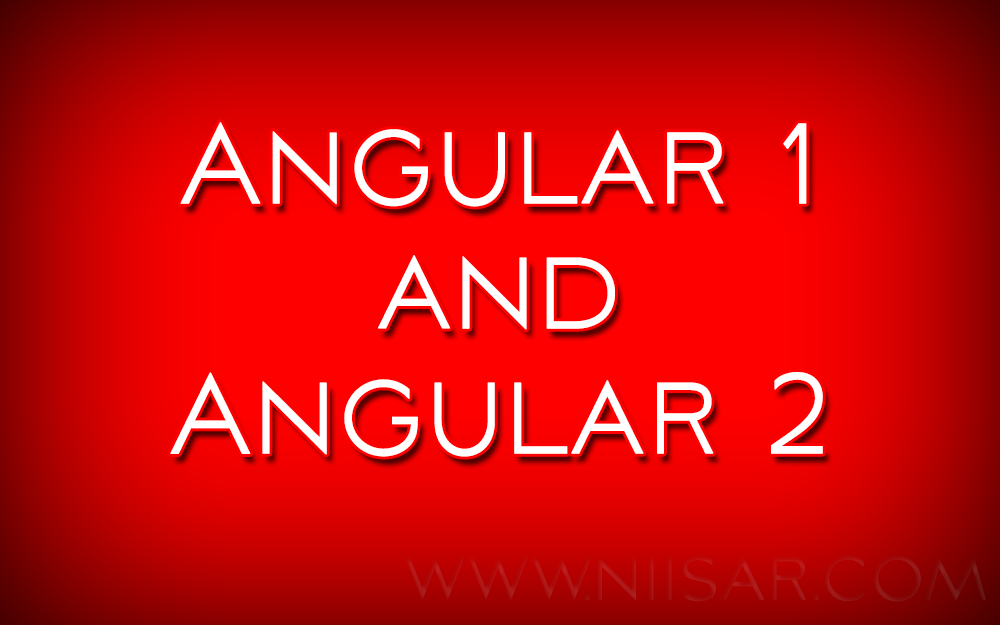
<style>
.page{position:relative;width:1000px;height:625px}
.page>*{position:absolute;margin:0}
.t1{font:140.1px/125.1px "AvianoSansLight";color:#ffffff;font-weight:bold;scale:0.76 1}
.t2{font:83.9px "AvianoSansLight";color:#ac0f0f;font-weight:bold;scale:0.76 1}
</style>
<div class="page">
<p class="t1" style="left:170px;top:122px;width:653px;height:335px;text-align:center">Angular 1<br>and<br>Angular 2</p>
<p class="t2" style="left:405px;top:554px;width:581px;height:48px">www.niisar.com</p>
</div>
